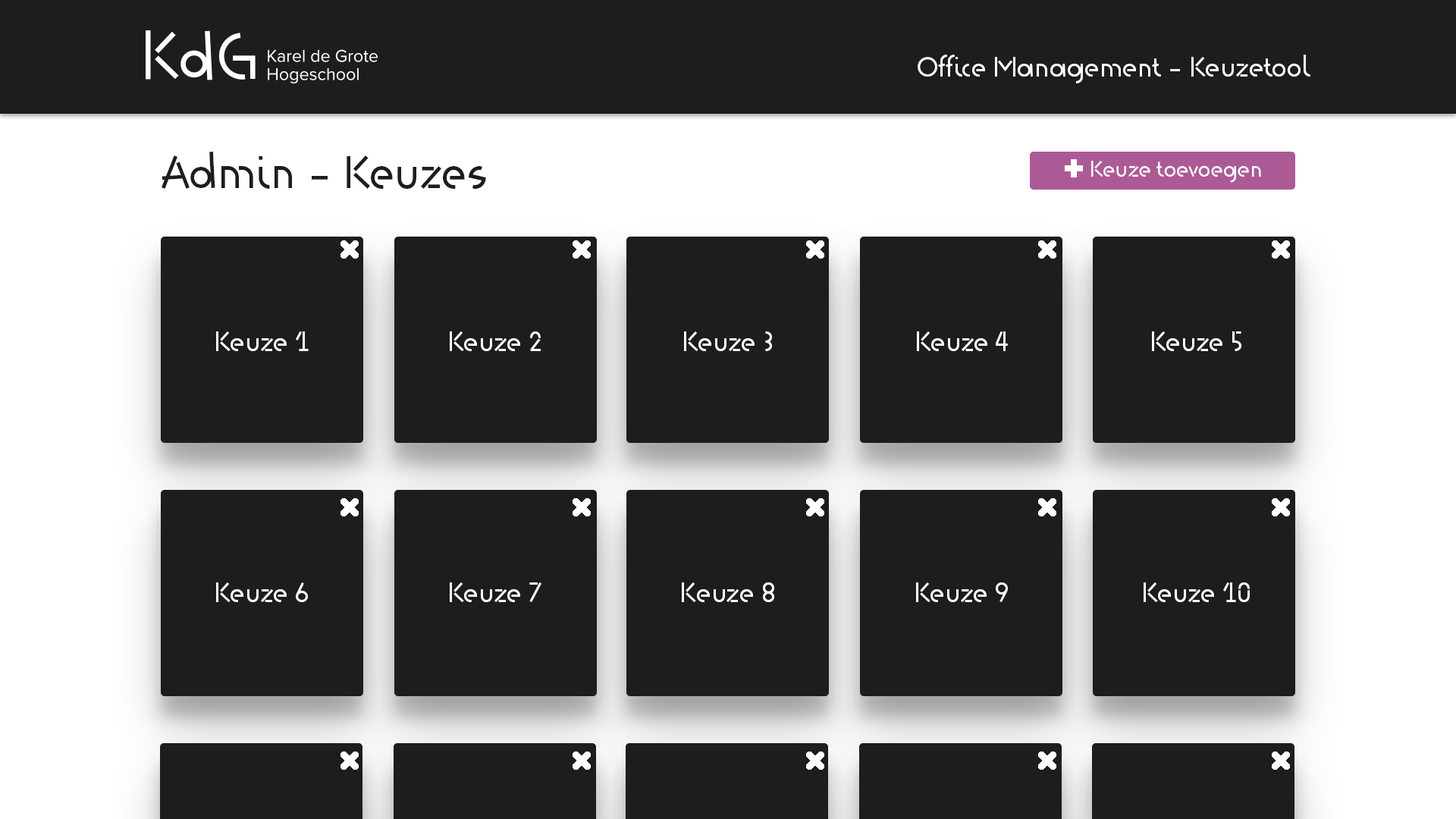
<style>
.page{position:relative;width:1456px;height:819px;background:#1d1d1b}
.page>*{position:absolute;margin:0}
.t1{font:27.3px "KdG-Regular";color:#fefefe}
.t2{font:45.5px "KdG-Regular";color:#1d1d1b}
.t3{font:22.7px "KdG-Regular";color:#fefefe}
</style>
<div class="page">
<p class="t1" style="left:918px;top:55px;width:392px;height:28px">Office Management - Keuzetool</p>
<p class="t2" style="left:162px;top:152px;width:324px;height:37px">Admin - Keuzes</p>
<p class="t3" style="left:1091px;top:161px;width:170px;height:22px">Keuze toevoegen</p>
<p class="t1" style="left:216px;top:331px;width:93px;height:20px">Keuze 1</p>
<p class="t1" style="left:450px;top:331px;width:91px;height:20px">Keuze 2</p>
<p class="t1" style="left:684px;top:331px;width:88px;height:20px">Keuze 3</p>
<p class="t1" style="left:917px;top:331px;width:91px;height:20px">Keuze 4</p>
<p class="t1" style="left:1152px;top:331px;width:89px;height:20px">Keuze 5</p>
<p class="t1" style="left:216px;top:582px;width:92px;height:20px">Keuze 6</p>
<p class="t1" style="left:450px;top:582px;width:91px;height:20px">Keuze 7</p>
<p class="t1" style="left:682px;top:582px;width:92px;height:20px">Keuze 8</p>
<p class="t1" style="left:916px;top:582px;width:92px;height:20px">Keuze 9</p>
<p class="t1" style="left:1144px;top:582px;width:106px;height:20px">Keuze 10</p>
</div>
